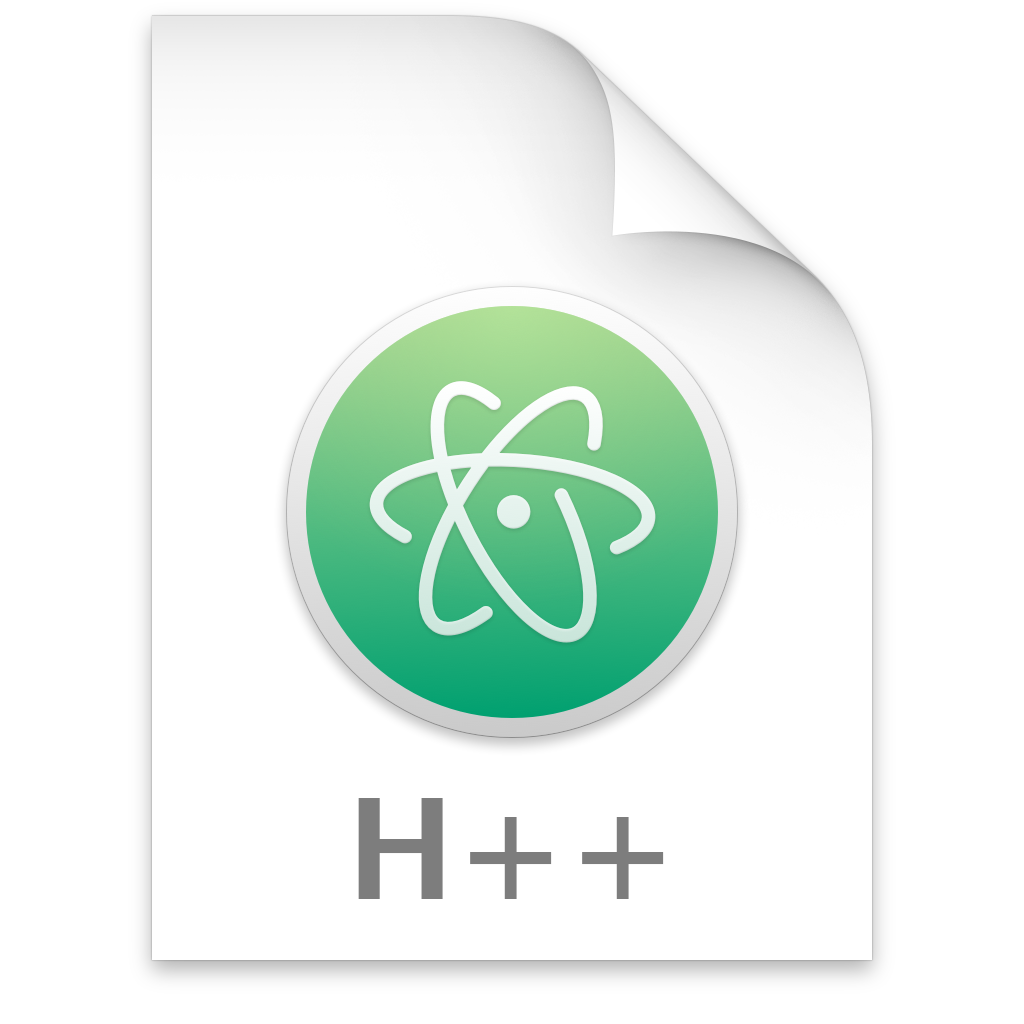
<style>
.page{position:relative;width:1024px;height:1024px;background:#ffffff}
.page>*{position:absolute;margin:0}
.t1{font:140px "LucidaGrande-Bold";color:#7d7d7d}
</style>
<div class="page">
<p class="t1" style="left:358px;top:798px;width:306px;height:101px">H++</p>
</div>
